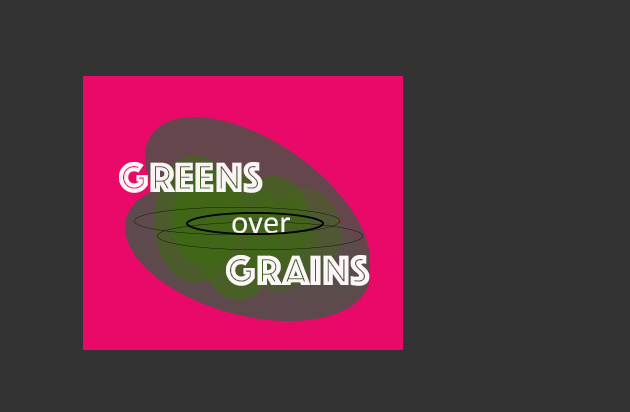
<style>
.page{position:relative;width:630px;height:412px;background:#333333}
.page>*{position:absolute;margin:0}
.t1{font:43.9px "Phosphate-Inline";color:#f9f5f5}
.t2{font:32.9px "Calibri";color:#faf7f7}
.t3{font:43.9px "Phosphate-Inline";color:#fbf7f7}
</style>
<div class="page">
<p class="t1" style="left:119px;top:162px;width:144px;height:31px">Greens</p>
<p class="t2" style="left:232px;top:217px;width:58px;height:17px">over</p>
<p class="t3" style="left:226px;top:255px;width:144px;height:31px">Grains</p>
</div>
